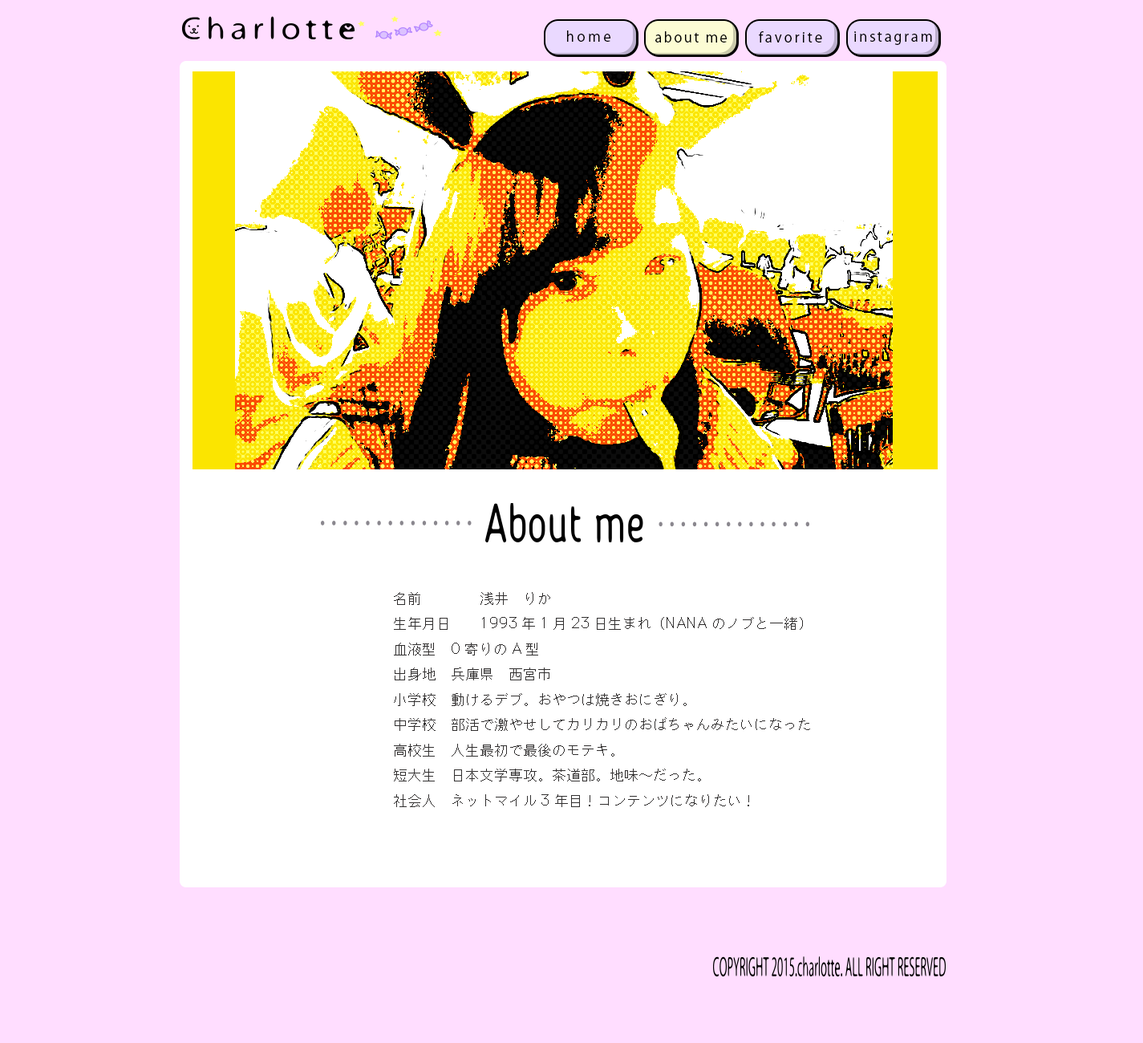
<style>
.page{position:relative;width:1143px;height:1043px;background:#ffddff}
.page>*{position:absolute;margin:0}
.t1{font:13.6px "KozGoPr6N-Regular";letter-spacing:0.22em;color:#000000}
.t2{font:13.6px "KozGoPr6N-Regular";letter-spacing:0.14em;color:#000000}
.t3{font:13.6px "KozGoPr6N-Regular";letter-spacing:0.18em;color:#000000}
.t4{font:13.6px "KozGoPr6N-Regular";letter-spacing:0.16em;color:#000000}
.t5{font:14.4px "Osaka";color:#312f2f}
</style>
<div class="page">
<p class="t1" style="left:567px;top:30px;width:44px;height:12px">home</p>
<p class="t2" style="left:655px;top:31px;width:72px;height:12px">about me</p>
<p class="t3" style="left:759px;top:31px;width:63px;height:12px">favorite</p>
<p class="t4" style="left:854px;top:31px;width:78px;height:14px">instagram</p>
<p class="t5" style="left:394px;top:592px;width:416px;height:215px">名前　　　 浅井　りか<br>生年月日 1993年1月23日生まれ（NANAのノブと一緒）<br>血液型 O寄りのA型<br>出身地 兵庫県　西宮市<br>小学校 動けるデブ。おやつは焼きおにぎり。<br>中学校 部活で激やせしてカリカリのおばちゃんみたいになった<br>高校生 人生最初で最後のモテキ。<br>短大生 日本文学専攻。茶道部。地味〜だった。<br>社会人 ネットマイル3年目！コンテンツになりたい！</p>
</div>
